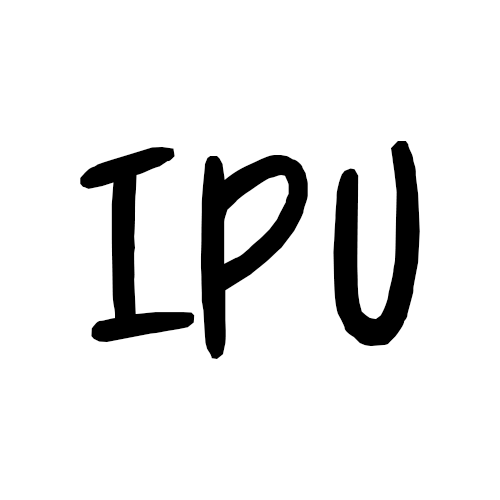
<style>
.page{position:relative;width:500px;height:500px;background:#ffffff}
.page>*{position:absolute;margin:0}
.t1{font:400px "Cafe24Shiningstar";color:#000000}
</style>
<div class="page">
<p class="t1" style="left:80px;top:141px;width:340px;height:218px">IPU</p>
</div>
